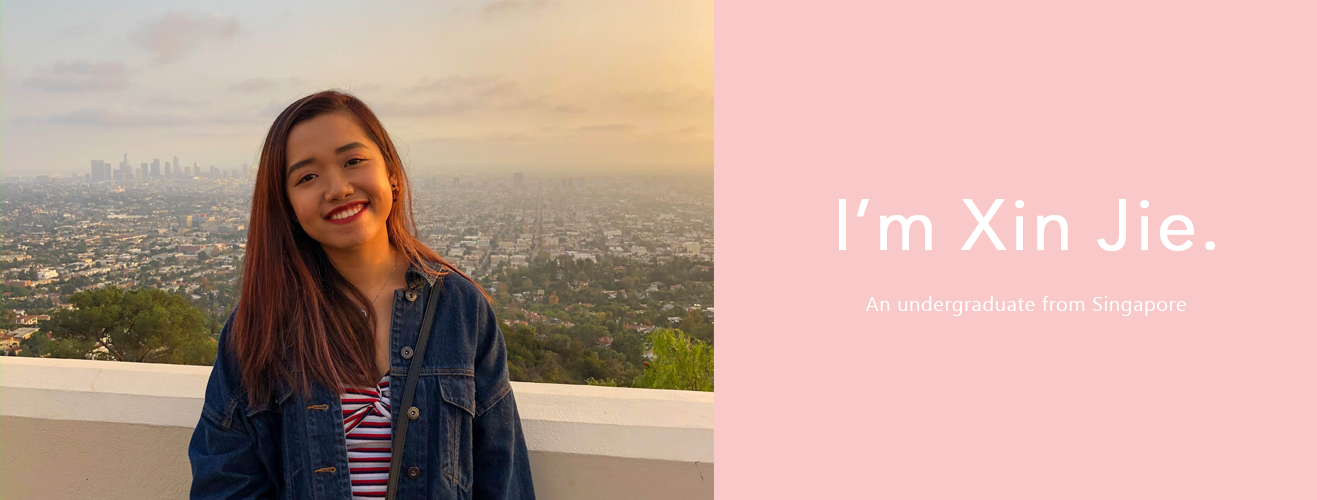
<style>
.page{position:relative;width:1317px;height:500px;background:#f9c9c9}
.page>*{position:absolute;margin:0}
.t1{font:70px "AvenirNextLTPro-Regular";letter-spacing:0.03em;color:#ffffff;font-weight:bold}
.t2{font:20px "SegoeUISymbol";letter-spacing:0.03em;color:#ffffff}
</style>
<div class="page">
<p class="t1" style="left:839px;top:199px;width:376px;height:52px">I’m Xin Jie.</p>
<p class="t2" style="left:866px;top:296px;width:320px;height:20px">An undergraduate from Singapore</p>
</div>
